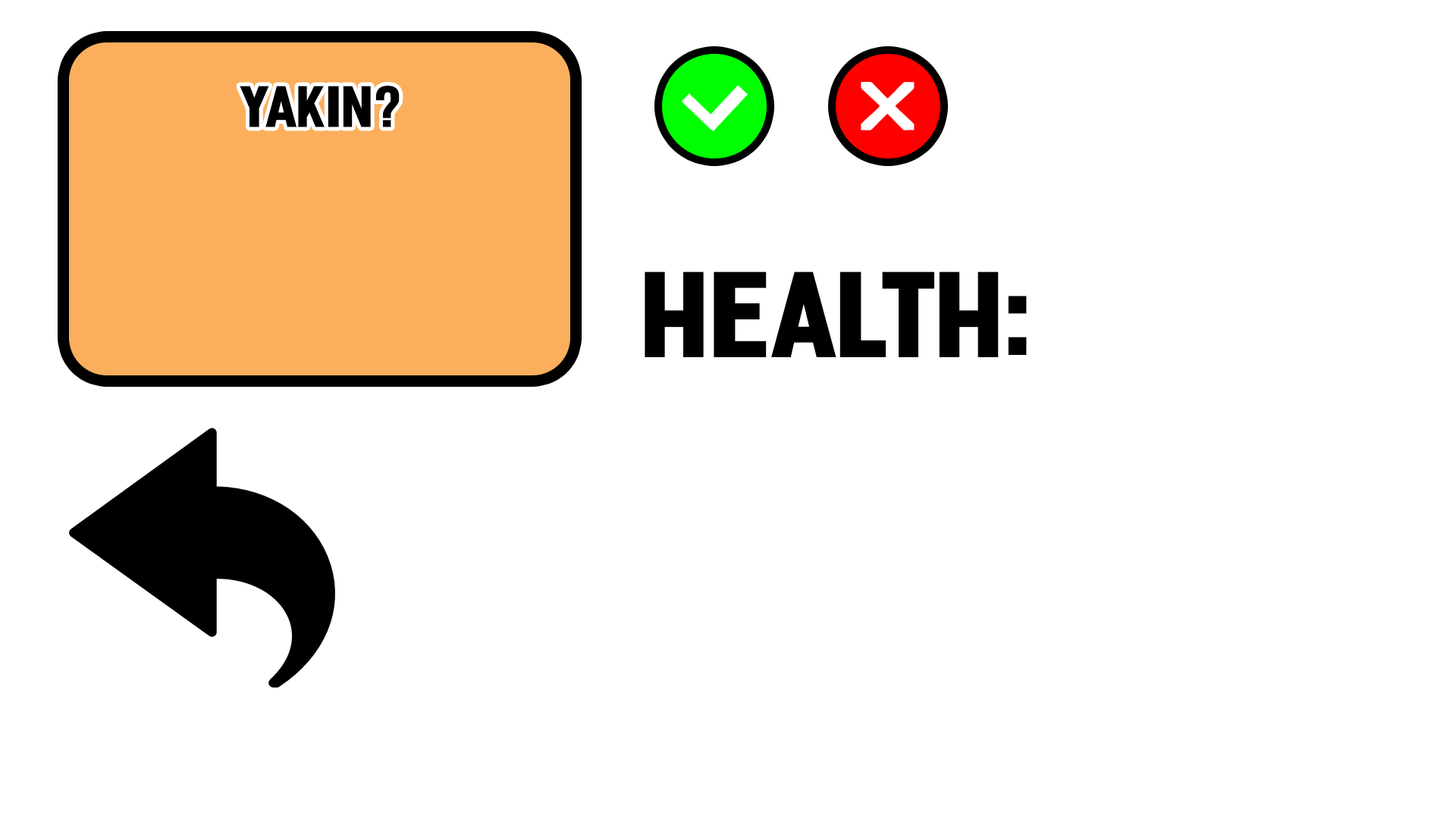
<style>
.page{position:relative;width:1456px;height:819px;background:#ffffff}
.page>*{position:absolute;margin:0}
.t1{font:54.6px "Fester-Semi-condensedHeavy";color:#000000}
.t2{font:66.8px "Fester-Semi-condensedHeavy";color:#ffffff}
.t3{font:69.8px "BerlinSansFB-Reg";color:#ffffff;scale:1.46 1}
.t4{font:54.6px "Fester-Semi-condensedHeavy";color:#ffffff}
.t5{font:113.7px "Fester-Semi-condensedHeavy";color:#000000}
</style>
<div class="page">
<p class="t1" style="left:240px;top:86px;width:160px;height:41px">YAKIN?</p>
<p class="t2" style="left:703px;top:85px;width:45px;height:46px;rotate:43deg">i</p>
<p class="t3" style="left:861px;top:82px;width:54px;height:48px">X</p>
<p class="t4" style="left:682px;top:93px;width:37px;height:37px;rotate:134deg">i</p>
<p class="t5" style="left:645px;top:271px;width:382px;height:86px">HEALTH:</p>
</div>
